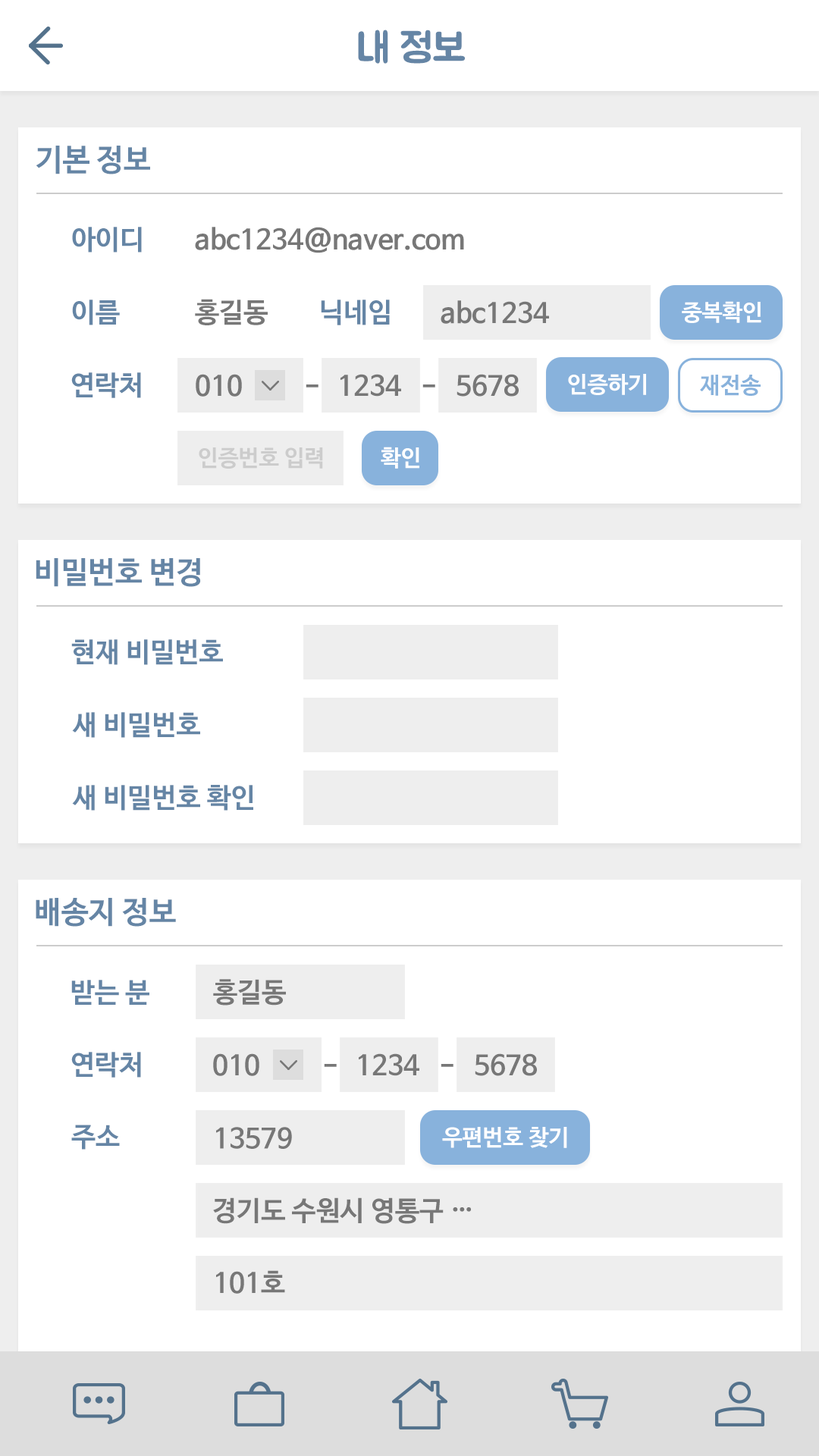
<style>
.page{position:relative;width:819px;height:1456px;background:#ffffff}
.page>*{position:absolute;margin:0}
.t1{font:40.9px "BMJUA";color:#6585a5}
.t2{font:30.3px "NanumBarunGothicBold";color:#6585a5}
.t3{font:27.3px "NanumBarunGothicBold";color:#6585a5}
.t4{font:27.3px "NanumBarunGothicBold";color:#777777}
.t5{font:22.7px "NanumBarunGothicBold";color:#ffffff}
.t6{font:22.7px "NanumBarunGothicBold";color:#88b2dc}
.t7{font:22.7px "NanumBarunGothicBold";color:#cccccc}
</style>
<div class="page">
<p class="t1" style="left:358px;top:30px;width:107px;height:34px">내 정보</p>
<p class="t2" style="left:36px;top:146px;width:114px;height:28px">기본 정보</p>
<p class="t3" style="left:72px;top:227px;width:70px;height:26px">아이디</p>
<p class="t4" style="left:195px;top:227px;width:269px;height:26px">abc1234@naver.com</p>
<p class="t3" style="left:72px;top:300px;width:48px;height:25px">이름</p>
<p class="t4" style="left:195px;top:299px;width:73px;height:26px">홍길동</p>
<p class="t3" style="left:321px;top:300px;width:69px;height:25px">닉네임</p>
<p class="t4" style="left:441px;top:300px;width:108px;height:24px">abc1234</p>
<p class="t5" style="left:682px;top:301px;width:79px;height:22px">중복확인</p>
<p class="t3" style="left:71px;top:372px;width:70px;height:26px">연락처</p>
<p class="t4" style="left:196px;top:374px;width:46px;height:23px">010</p>
<p class="t4" style="left:340px;top:374px;width:61px;height:23px">1234</p>
<p class="t4" style="left:457px;top:374px;width:62px;height:23px">5678</p>
<p class="t5" style="left:568px;top:374px;width:78px;height:21px">인증하기</p>
<p class="t6" style="left:700px;top:375px;width:61px;height:21px">재전송</p>
<p class="t4" style="left:306px;top:384px;width:12px;height:4px">-</p>
<p class="t4" style="left:422px;top:384px;width:13px;height:4px">-</p>
<p class="t7" style="left:199px;top:447px;width:124px;height:22px">인증번호 입력</p>
<p class="t5" style="left:381px;top:447px;width:38px;height:22px">확인</p>
<p class="t2" style="left:36px;top:558px;width:165px;height:29px">비밀번호 변경</p>
<p class="t3" style="left:71px;top:639px;width:152px;height:26px">현재 비밀번호</p>
<p class="t3" style="left:72px;top:712px;width:128px;height:26px">새 비밀번호</p>
<p class="t3" style="left:72px;top:785px;width:181px;height:26px">새 비밀번호 확인</p>
<p class="t2" style="left:36px;top:898px;width:140px;height:29px">배송지 정보</p>
<p class="t3" style="left:71px;top:980px;width:78px;height:25px">받는 분</p>
<p class="t4" style="left:213px;top:979px;width:73px;height:27px">홍길동</p>
<p class="t3" style="left:71px;top:1052px;width:70px;height:26px">연락처</p>
<p class="t4" style="left:213px;top:1053px;width:46px;height:23px">010</p>
<p class="t4" style="left:359px;top:1053px;width:60px;height:23px">1234</p>
<p class="t4" style="left:475px;top:1053px;width:62px;height:23px">5678</p>
<p class="t4" style="left:324px;top:1064px;width:13px;height:3px">-</p>
<p class="t4" style="left:441px;top:1064px;width:12px;height:3px">-</p>
<p class="t3" style="left:71px;top:1125px;width:49px;height:25px">주소</p>
<p class="t4" style="left:216px;top:1127px;width:76px;height:22px">13579</p>
<p class="t5" style="left:442px;top:1127px;width:125px;height:21px">우편번호 찾기</p>
<p class="t4" style="left:213px;top:1197px;width:258px;height:27px">경기도 수원시 영통구 …</p>
<p class="t4" style="left:216px;top:1270px;width:69px;height:24px">101호</p>
</div>
